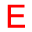
<style>
.page{position:relative;width:32px;height:32px;background:#ffffff}
.page>*{position:absolute;margin:0}
.t1{font:32px "ArialMT";color:#ff0000}
</style>
<div class="page">
<p class="t1" style="left:7px;top:4px;width:18px;height:24px">E</p>
</div>
